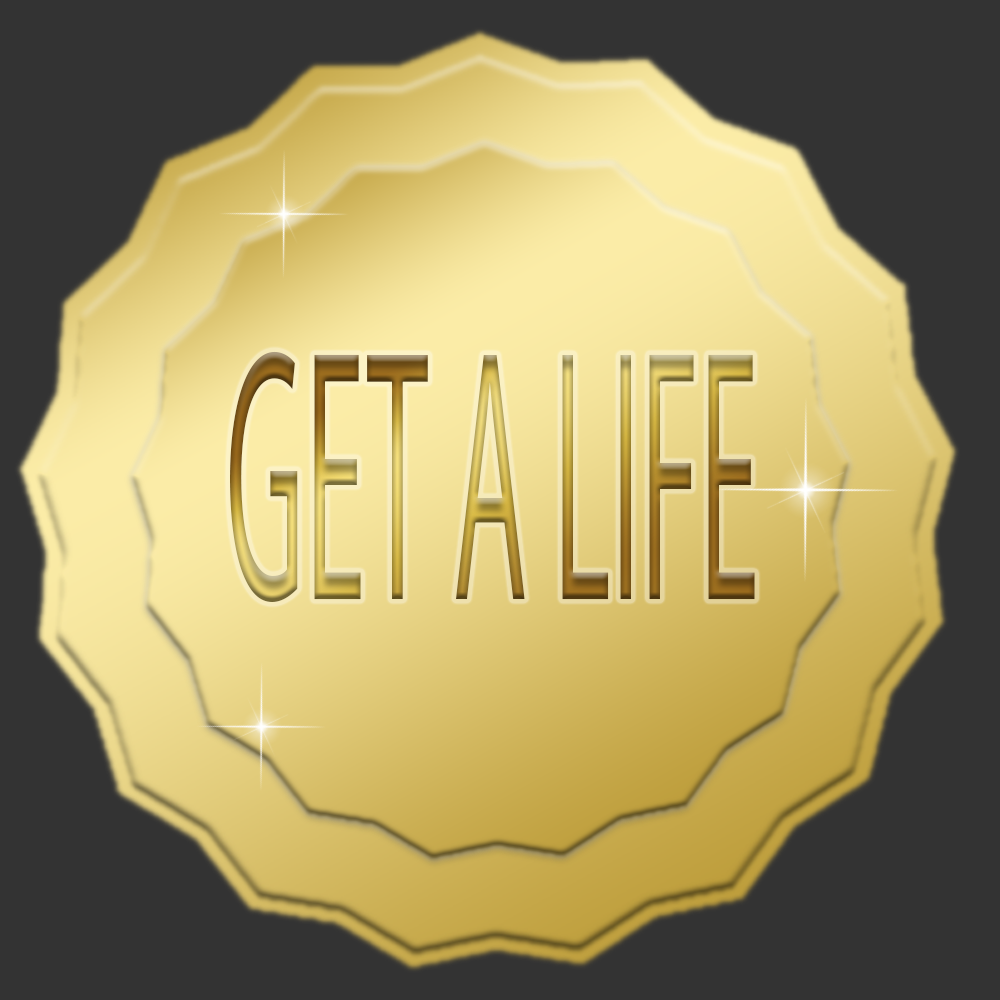
<style>
.page{position:relative;width:1000px;height:1000px;background:#333333}
.page>*{position:absolute;margin:0}
.t1{font:361.4px "MyriadPro-Regular";scale:0.34 1}
</style>
<div class="page">
<p class="t1" style="left:230px;top:351px;width:525px;height:251px">GET A LIFE</p>
</div>
